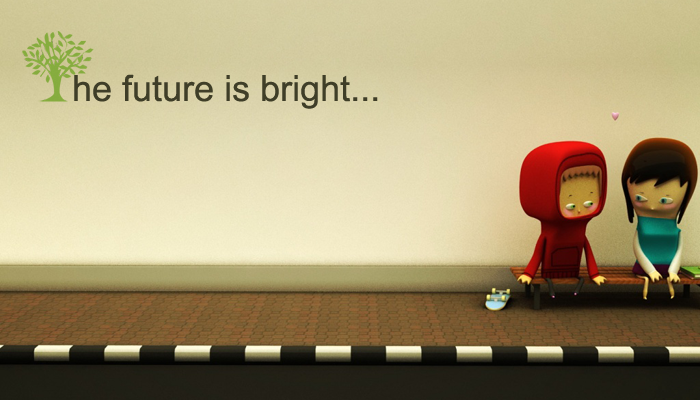
<style>
.page{position:relative;width:700px;height:400px}
.page>*{position:absolute;margin:0}
.t1{font:36px "ArialMT";color:#3f3e28}
</style>
<div class="page">
<p class="t1" style="left:74px;top:74px;width:304px;height:35px">he future is bright...</p>
</div>
